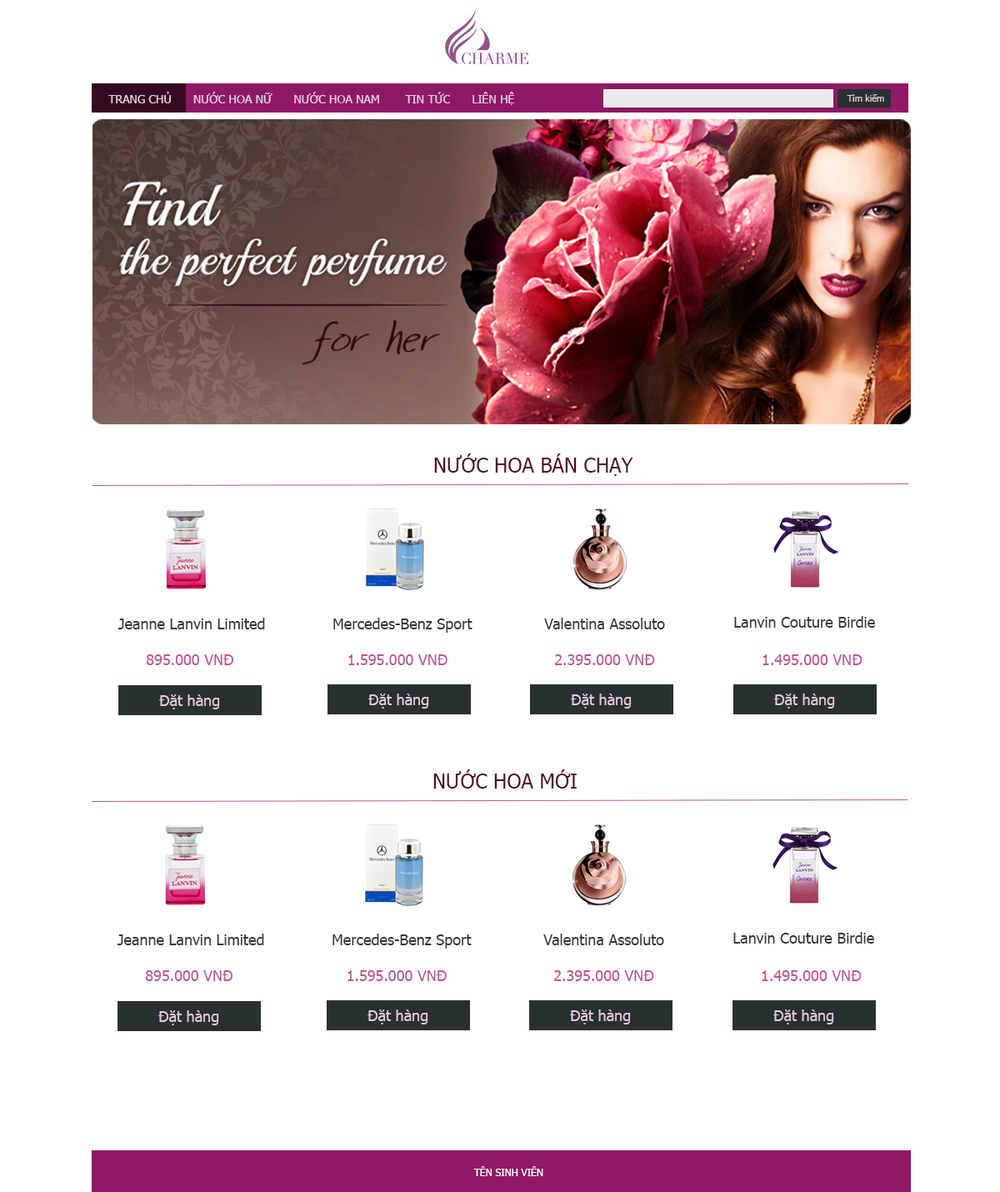
<style>
.page{position:relative;width:1000px;height:1192px;background:#ffffff}
.page>*{position:absolute;margin:0}
.t1{font:11.7px "Tahoma";color:#e3cde2}
.t2{font:9.2px "Tahoma";color:#e3cde2}
.t3{font:20px "Tahoma";color:#500a2f;text-transform:uppercase}
.t4{font:15px "Tahoma";color:#363535}
.t5{font:15px "Tahoma";color:#b85797}
.t6{font:15px "Tahoma";color:#e1c7dd}
.t7{font:10px "Tahoma";color:#ffffff}
</style>
<div class="page">
<p class="t1" style="left:108px;top:92px;width:406px;height:13px">TRANG CHỦ      NƯỚC HOA NỮ      NƯỚC HOA NAM       TIN TỨC      LIÊN HỆ</p>
<p class="t2" style="left:847px;top:94px;width:37px;height:8px">Tìm kiếm</p>
<p class="t3" style="left:434px;top:453px;width:200px;height:23px">Nước hoa bán chạy</p>
<p class="t4" style="left:118px;top:618px;width:147px;height:11px">Jeanne Lanvin Limited</p>
<p class="t4" style="left:333px;top:618px;width:140px;height:15px">Mercedes-Benz Sport</p>
<p class="t4" style="left:544px;top:618px;width:121px;height:11px">Valentina Assoluto</p>
<p class="t4" style="left:734px;top:616px;width:141px;height:12px">Lanvin Couture Birdie</p>
<p class="t5" style="left:146px;top:654px;width:88px;height:11px">895.000 VNĐ</p>
<p class="t5" style="left:348px;top:654px;width:100px;height:11px">1.595.000 VNĐ</p>
<p class="t5" style="left:555px;top:654px;width:100px;height:11px">2.395.000 VNĐ</p>
<p class="t5" style="left:763px;top:654px;width:100px;height:11px">1.495.000 VNĐ</p>
<p class="t6" style="left:159px;top:694px;width:61px;height:15px">Đặt hàng</p>
<p class="t6" style="left:368px;top:694px;width:61px;height:15px">Đặt hàng</p>
<p class="t6" style="left:571px;top:694px;width:61px;height:15px">Đặt hàng</p>
<p class="t6" style="left:774px;top:694px;width:61px;height:15px">Đặt hàng</p>
<p class="t3" style="left:433px;top:769px;width:144px;height:20px">Nước hoa MỚI</p>
<p class="t4" style="left:118px;top:934px;width:146px;height:11px">Jeanne Lanvin Limited</p>
<p class="t4" style="left:333px;top:934px;width:139px;height:15px">Mercedes-Benz Sport</p>
<p class="t4" style="left:544px;top:934px;width:120px;height:11px">Valentina Assoluto</p>
<p class="t4" style="left:734px;top:932px;width:140px;height:12px">Lanvin Couture Birdie</p>
<p class="t5" style="left:145px;top:970px;width:88px;height:11px">895.000 VNĐ</p>
<p class="t5" style="left:348px;top:970px;width:99px;height:11px">1.595.000 VNĐ</p>
<p class="t5" style="left:554px;top:970px;width:100px;height:11px">2.395.000 VNĐ</p>
<p class="t5" style="left:762px;top:970px;width:100px;height:11px">1.495.000 VNĐ</p>
<p class="t6" style="left:158px;top:1010px;width:61px;height:15px">Đặt hàng</p>
<p class="t6" style="left:368px;top:1009px;width:60px;height:15px">Đặt hàng</p>
<p class="t6" style="left:570px;top:1009px;width:61px;height:15px">Đặt hàng</p>
<p class="t6" style="left:774px;top:1009px;width:60px;height:15px">Đặt hàng</p>
<p class="t7" style="left:473px;top:1166px;width:71px;height:10px">TÊN SINH VIÊN</p>
</div>
